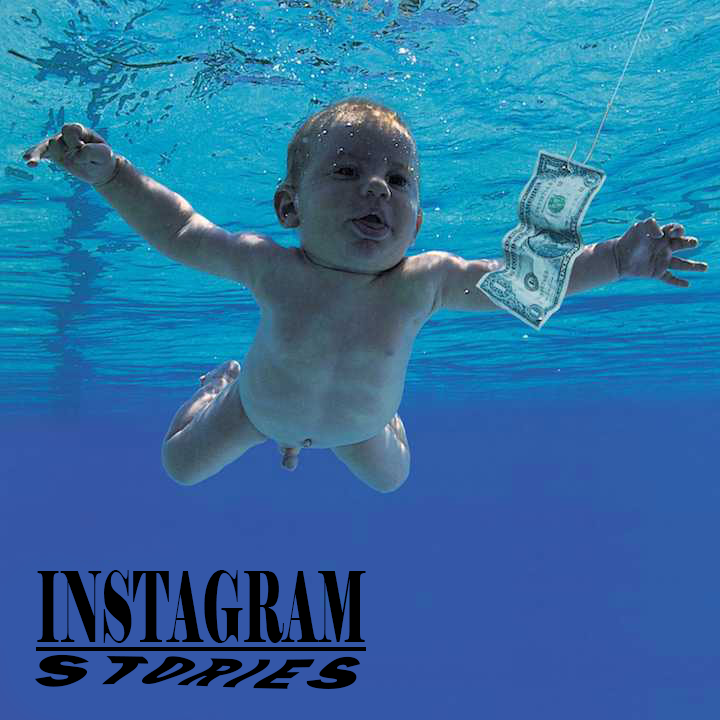
<style>
.page{position:relative;width:720px;height:720px}
.page>*{position:absolute;margin:0}
.t1{font:97.4px "Elephant-Regular";color:#000000;scale:0.46 1}
.t2{font:48.2px "FranklinGothic-Heavy";letter-spacing:0.2em;color:#000000;scale:1.32 1}
</style>
<div class="page">
<p class="t1" style="left:37px;top:570px;width:329px;height:73px">INSTAGRAM</p>
<p class="t2" style="left:35px;top:654px;width:325px;height:35px">STORIES</p>
</div>
